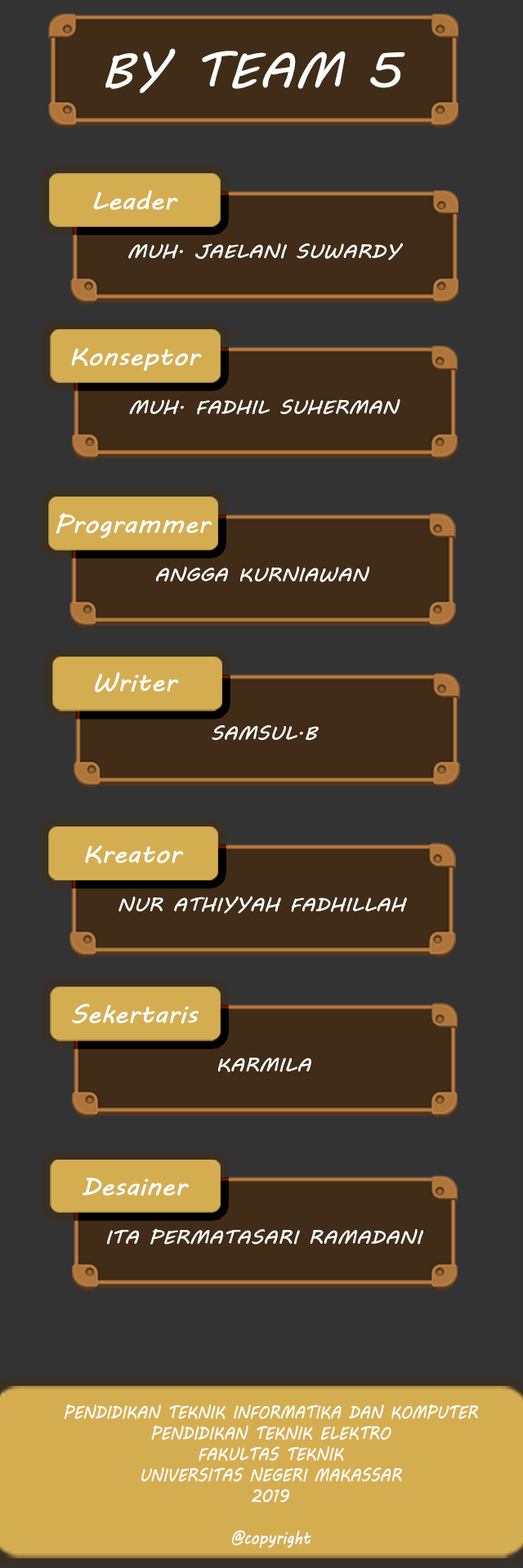
<style>
.page{position:relative;width:523px;height:1568px;background:#333333}
.page>*{position:absolute;margin:0}
.t1{font:49px "MVBoli";color:#ffffff;scale:1.06 1}
.t2{font:24.5px "MVBoli";color:#ffffff;scale:1.14 1}
.t3{font:18.4px "MVBoli";color:#ffffff;scale:1.14 1}
.t4{font:24.5px "MVBoli";color:#ffffff;scale:1.13 1}
.t5{font:18.4px "MVBoli";color:#ffffff;scale:1.13 1}
.t6{font:17.4px "MVBoli";color:#ffffff;scale:0.89 1}
</style>
<div class="page">
<p class="t1" style="left:105px;top:48px;width:300px;height:45px">BY TEAM 5</p>
<p class="t2" style="left:93px;top:190px;width:85px;height:20px">Leader</p>
<p class="t3" style="left:128px;top:243px;width:275px;height:18px">MUH. JAELANI SUWARDY</p>
<p class="t4" style="left:71px;top:348px;width:131px;height:23px">Konseptor</p>
<p class="t5" style="left:129px;top:399px;width:271px;height:16px">MUH. FADHIL SUHERMAN</p>
<p class="t4" style="left:56px;top:513px;width:156px;height:25px">Programmer</p>
<p class="t5" style="left:156px;top:566px;width:213px;height:16px">ANGGA KURNIAWAN</p>
<p class="t4" style="left:95px;top:672px;width:84px;height:21px">Writer</p>
<p class="t5" style="left:212px;top:725px;width:106px;height:16px">SAMSUL.B</p>
<p class="t4" style="left:85px;top:845px;width:99px;height:19px">Kreator</p>
<p class="t5" style="left:118px;top:896px;width:289px;height:18px">NUR ATHIYYAH FADHILLAH</p>
<p class="t4" style="left:72px;top:1004px;width:126px;height:20px">Sekertaris</p>
<p class="t5" style="left:218px;top:1058px;width:93px;height:14px">KARMILA</p>
<p class="t4" style="left:82px;top:1178px;width:107px;height:18px">Desainer</p>
<p class="t5" style="left:107px;top:1228px;width:316px;height:17px">ITA PERMATASARI RAMADANI</p>
<p class="t6" style="left:65px;top:1404px;width:413px;height:144px;text-align:center">PENDIDIKAN TEKNIK INFORMATIKA DAN KOMPUTER<br>PENDIDIKAN TEKNIK ELEKTRO<br>FAKULTAS TEKNIK<br>UNIVERSITAS NEGERI MAKASSAR<br>2019<br><br>@copyright</p>
</div>
